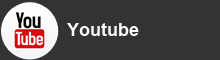
<style>
.page{position:relative;width:220px;height:60px;background:#333333}
.page>*{position:absolute;margin:0}
.t1{font:18px "Arial-BoldMT";color:#fcfbfb}
</style>
<div class="page">
<p class="t1" style="left:67px;top:23px;width:72px;height:13px">Youtube</p>
</div>
